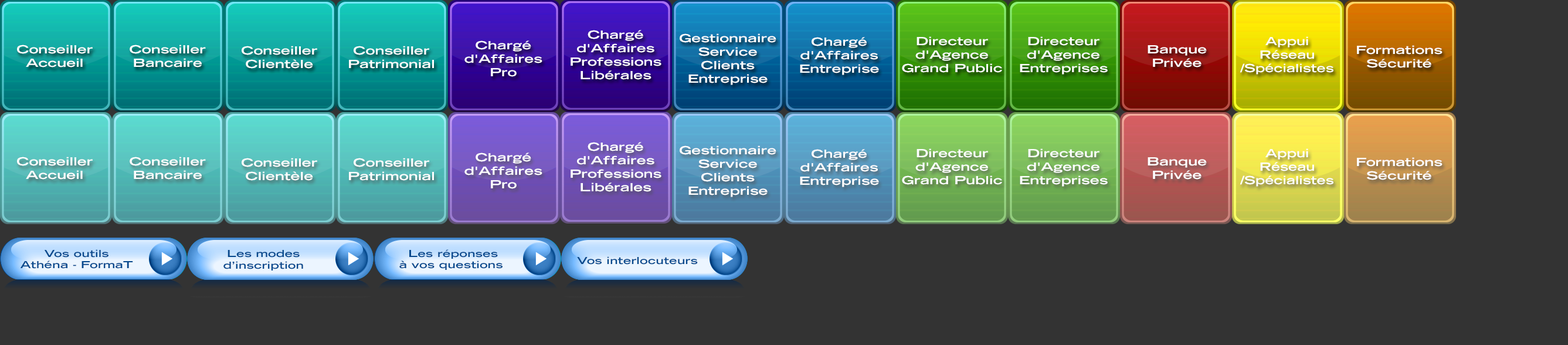
<style>
.page{position:relative;width:1568px;height:345px;background:#333333}
.page>*{position:absolute;margin:0}
.t1{font:11.3px "TradeGothicLH-BoldExtended";color:#ffffff;scale:1.25 1}
.t2{font:11.3px "TradeGothicLH-BoldExtended";color:#ffffff;scale:1.18 1}
.t3{font:9.6px "TradeGothicLH-BoldExtended";color:#06498d;scale:1.25 1}
</style>
<div class="page">
<p class="t1" style="left:571px;top:30px;width:90px;height:50px;text-align:center">Chargé<br>d'Affaires<br>Professions<br>Libérales</p>
<p class="t1" style="left:464px;top:40px;width:78px;height:37px;text-align:center">Chargé<br>d'Affaires<br>Pro</p>
<p class="t1" style="left:680px;top:33px;width:96px;height:52px;text-align:center">Gestionnaire<br>Service<br>Clients<br>Entreprise</p>
<p class="t1" style="left:800px;top:37px;width:79px;height:38px;text-align:center">Chargé<br>d'Affaires<br>Entreprise</p>
<p class="t1" style="left:902px;top:36px;width:100px;height:37px;text-align:center">Directeur<br>d'Agence<br>Grand Public</p>
<p class="t1" style="left:1020px;top:36px;width:88px;height:38px;text-align:center">Directeur<br>d'Agence<br>Entreprises</p>
<p class="t2" style="left:1240px;top:36px;width:93px;height:38px;text-align:center">Appui<br>Réseau<br>/Spécialistes</p>
<p class="t1" style="left:17px;top:45px;width:76px;height:22px;text-align:center">Conseiller<br>Accueil</p>
<p class="t1" style="left:130px;top:45px;width:76px;height:22px;text-align:center">Conseiller<br>Bancaire</p>
<p class="t1" style="left:242px;top:46px;width:75px;height:23px;text-align:center">Conseiller<br>Clientèle</p>
<p class="t1" style="left:349px;top:46px;width:85px;height:23px;text-align:center">Conseiller<br>Patrimonial</p>
<p class="t1" style="left:1148px;top:45px;width:59px;height:22px;text-align:center">Banque<br>Privée</p>
<p class="t1" style="left:1357px;top:45px;width:86px;height:23px;text-align:center">Formations<br>Sécurité</p>
<p class="t1" style="left:571px;top:142px;width:90px;height:50px;text-align:center">Chargé<br>d'Affaires<br>Professions<br>Libérales</p>
<p class="t1" style="left:680px;top:145px;width:96px;height:52px;text-align:center">Gestionnaire<br>Service<br>Clients<br>Entreprise</p>
<p class="t1" style="left:800px;top:149px;width:79px;height:38px;text-align:center">Chargé<br>d'Affaires<br>Entreprise</p>
<p class="t1" style="left:902px;top:148px;width:100px;height:37px;text-align:center">Directeur<br>d'Agence<br>Grand Public</p>
<p class="t1" style="left:1020px;top:148px;width:88px;height:38px;text-align:center">Directeur<br>d'Agence<br>Entreprises</p>
<p class="t2" style="left:1240px;top:148px;width:93px;height:38px;text-align:center">Appui<br>Réseau<br>/Spécialistes</p>
<p class="t1" style="left:17px;top:157px;width:76px;height:22px;text-align:center">Conseiller<br>Accueil</p>
<p class="t1" style="left:130px;top:157px;width:76px;height:22px;text-align:center">Conseiller<br>Bancaire</p>
<p class="t1" style="left:242px;top:158px;width:75px;height:23px;text-align:center">Conseiller<br>Clientèle</p>
<p class="t1" style="left:349px;top:158px;width:85px;height:23px;text-align:center">Conseiller<br>Patrimonial</p>
<p class="t1" style="left:464px;top:152px;width:78px;height:37px;text-align:center">Chargé<br>d'Affaires<br>Pro</p>
<p class="t1" style="left:1148px;top:157px;width:59px;height:22px;text-align:center">Banque<br>Privée</p>
<p class="t1" style="left:1357px;top:157px;width:86px;height:23px;text-align:center">Formations<br>Sécurité</p>
<p class="t3" style="left:20px;top:249px;width:113px;height:20px;text-align:center">Vos outils<br>Athéna - FormaT</p>
<p class="t3" style="left:223px;top:250px;width:80px;height:20px;text-align:center">Les modes<br>d’inscription</p>
<p class="t3" style="left:399px;top:249px;width:104px;height:21px;text-align:center">Les réponses<br>à vos questions</p>
<p class="t3" style="left:577px;top:256px;width:121px;height:8px">Vos interlocuteurs</p>
</div>
